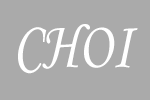
<style>
.page{position:relative;width:150px;height:100px;background:#aaaaaa}
.page>*{position:absolute;margin:0}
.t1{font:67.2px "MonotypeCorsiva";color:#ffffff;text-transform:uppercase;scale:0.82 1}
</style>
<div class="page">
<p class="t1" style="left:18px;top:24px;width:120px;height:50px">choi</p>
</div>
